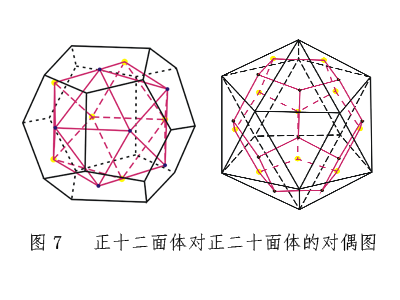
<style>
.page{position:relative;width:400px;height:300px;background:#ffffff}
.page>*{position:absolute;margin:0}
.t1{font:19px "·ÂËÎ";color:#040404}
.t2{font:19px "·ÂËÎ";letter-spacing:0.3em;color:#040404}
</style>
<div class="page">
<p class="t1" style="left:31px;top:233px;width:345px;height:18px"><span class="t2">图7 </span> 正十二面体对正二十面体的对偶图</p>
</div>
